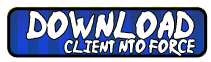
<style>
.page{position:relative;width:211px;height:62px;background:#ffffff}
.page>*{position:absolute;margin:0}
.t1{font:30.9px "Ninja-Naruto";color:#ffffff}
.t2{font:14.3px "Ninja-Naruto";color:#ffffff}
.t3{font:15.3px "Ninja-Naruto";color:#ffffff}
</style>
<div class="page">
<p class="t1" style="left:26px;top:10px;width:168px;height:30px">download</p>
<p class="t2" style="left:64px;top:39px;width:51px;height:14px">client</p>
<p class="t3" style="left:118px;top:39px;width:77px;height:17px">Nto force</p>
</div>
